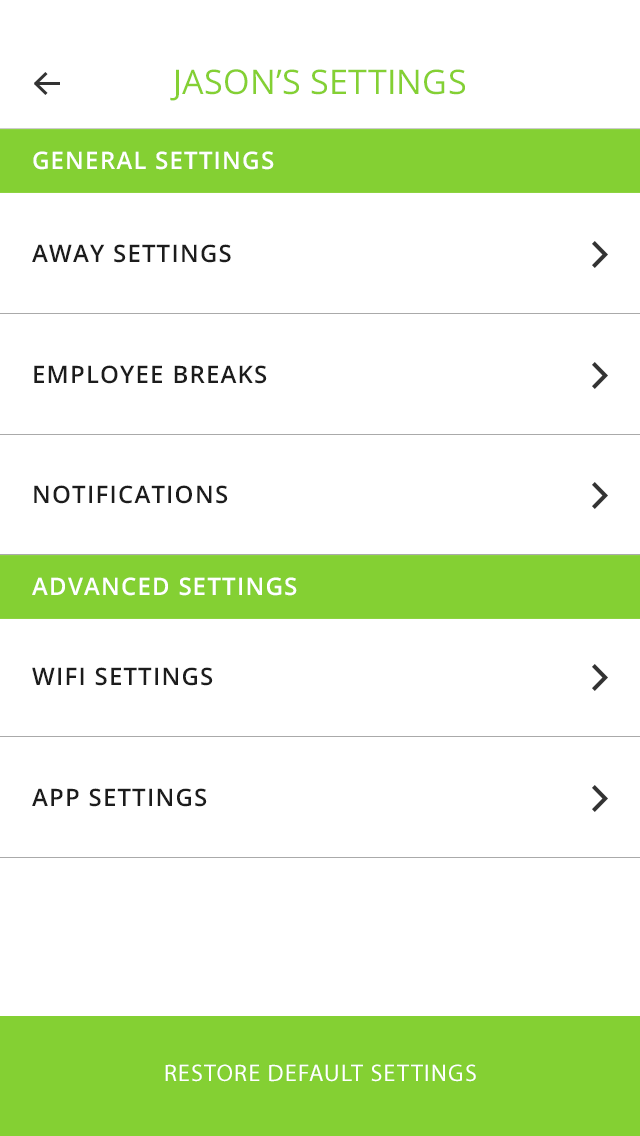
<style>
.page{position:relative;width:640px;height:1136px;background:#ffffff}
.page>*{position:absolute;margin:0}
.t1{font:34px "OpenSans";letter-spacing:0.01em;color:#84d033;text-transform:uppercase}
.t2{font:24px "OpenSans-Semibold";letter-spacing:0.05em;color:#ffffff;text-transform:uppercase}
.t3{font:24px "OpenSans-Semibold";letter-spacing:0.05em;color:#1c1c1c;text-transform:uppercase}
.t4{font:24px "MyriadPro-Regular";letter-spacing:0.05em;color:#ffffff;text-transform:uppercase}
</style>
<div class="page">
<p class="t1" style="left:170px;top:69px;width:295px;height:32px">JASON’s Settings</p>
<p class="t2" style="left:33px;top:151px;width:241px;height:19px">GENERAL SETTINGS</p>
<p class="t3" style="left:32px;top:244px;width:199px;height:19px">AWAY SETTINGS</p>
<p class="t3" style="left:34px;top:365px;width:233px;height:19px">EMPLOYEE BREAKS</p>
<p class="t3" style="left:34px;top:485px;width:194px;height:19px">NOTIFICATIONS</p>
<p class="t2" style="left:32px;top:577px;width:265px;height:19px">ADVANCED SETTINGS</p>
<p class="t3" style="left:32px;top:667px;width:181px;height:19px">WIFI SETTINGS</p>
<p class="t3" style="left:32px;top:788px;width:175px;height:19px">APP SETTINGS</p>
<p class="t4" style="left:165px;top:1064px;width:311px;height:18px">RESTORE DEFAULT SETTINGS</p>
</div>
